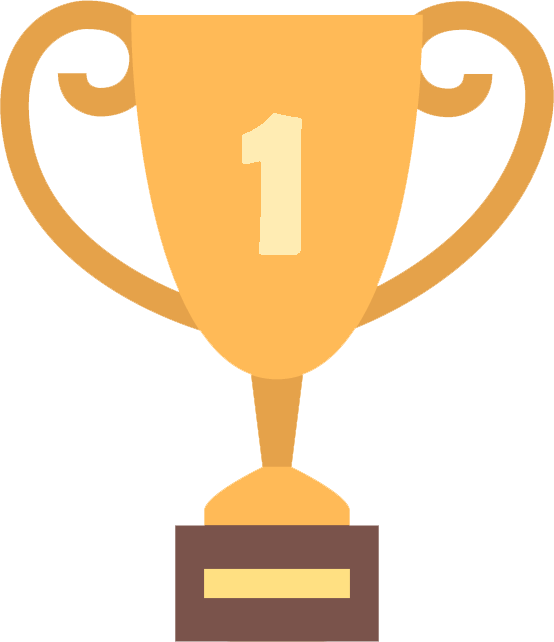
<style>
.page{position:relative;width:554px;height:642px;background:#ffffff}
.page>*{position:absolute;margin:0}
.t1{font:230px "BerlinSansFBDemi-Bold";color:#ffecb3}
</style>
<div class="page">
<p class="t1" style="left:242px;top:113px;width:60px;height:142px">1</p>
</div>
